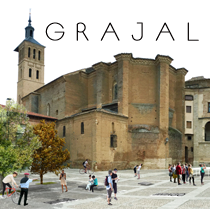
<style>
.page{position:relative;width:210px;height:210px;background:#ffffff}
.page>*{position:absolute;margin:0}
.t1{font:22.8px "SusannaRegular";letter-spacing:0.42em;color:#040000;font-weight:bold}
</style>
<div class="page">
<p class="t1" style="left:45px;top:22px;width:154px;height:19px">GRAJAL</p>
</div>
